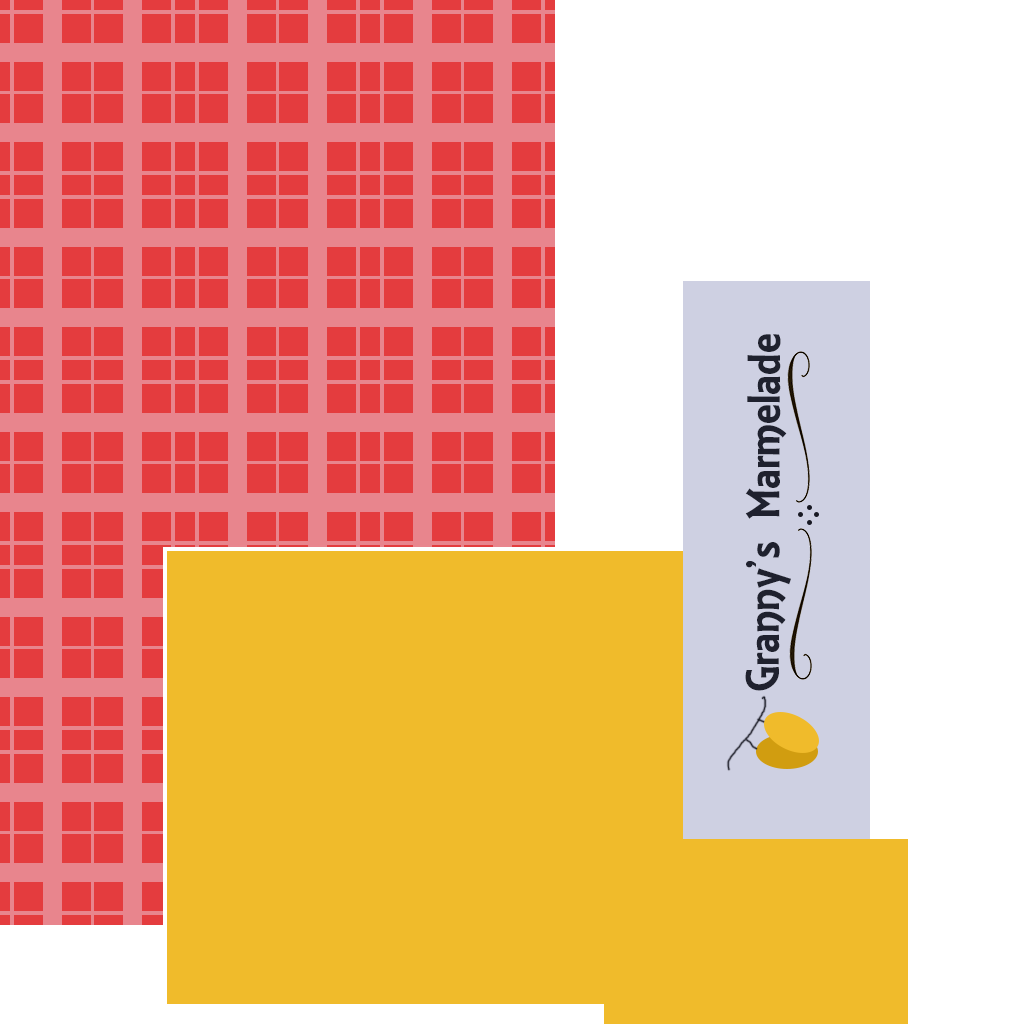
<style>
.page{position:relative;width:1024px;height:1024px;background:#ffffff}
.page>*{position:absolute;margin:0}
.t1{font:50px "ARESSENCE";color:#1f212e}
</style>
<div class="page">
<p class="t1" style="left:745px;top:334px;width:46px;height:357px;rotate:-90deg">Granny’s Marmelade</p>
</div>
